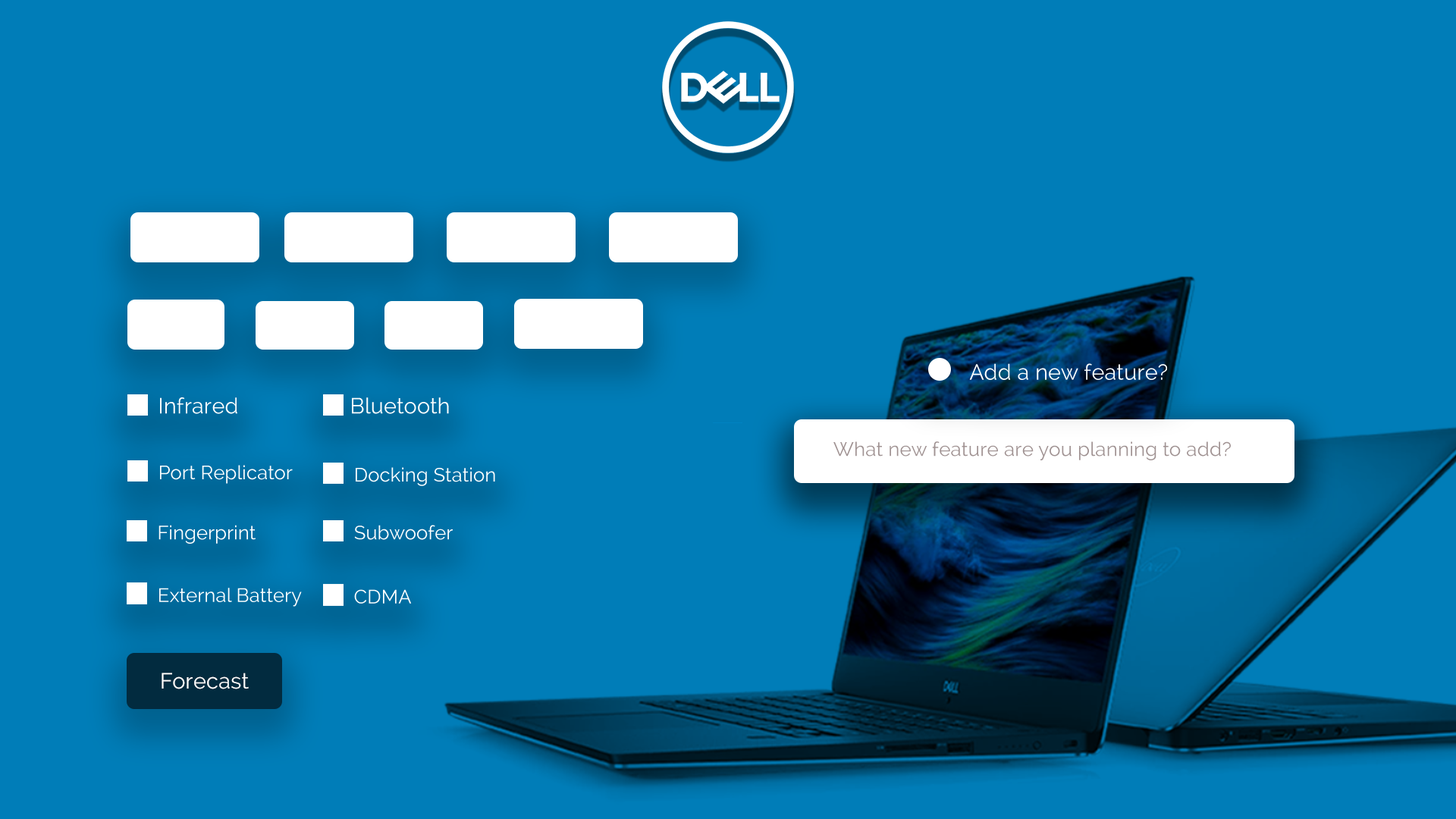
<style>
.page{position:relative;width:1456px;height:819px;background:#007db8}
.page>*{position:absolute;margin:0}
.t1{font:21.8px "Raleway";letter-spacing:0.008em;color:#ffffff}
.t2{font:19.6px "Raleway";letter-spacing:0.008em;color:#a09292}
.t3{font:19.3px "Raleway";letter-spacing:0.008em;color:#ffffff}
</style>
<div class="page">
<p class="t1" style="left:969px;top:363px;width:198px;height:17px">Add a new feature?</p>
<p class="t1" style="left:160px;top:397px;width:77px;height:17px">Infrared</p>
<p class="t1" style="left:352px;top:397px;width:97px;height:17px">Bluetooth</p>
<p class="t2" style="left:833px;top:441px;width:398px;height:19px">What new feature are you planning to add?</p>
<p class="t3" style="left:160px;top:465px;width:133px;height:19px">Port Replicator</p>
<p class="t3" style="left:356px;top:467px;width:139px;height:19px">Docking Station</p>
<p class="t3" style="left:158px;top:525px;width:98px;height:19px">Fingerprint</p>
<p class="t3" style="left:354px;top:525px;width:99px;height:15px">Subwoofer</p>
<p class="t3" style="left:159px;top:588px;width:143px;height:19px">External Battery</p>
<p class="t3" style="left:354px;top:589px;width:58px;height:15px">CDMA</p>
<p class="t1" style="left:162px;top:673px;width:87px;height:16px">Forecast</p>
</div>
